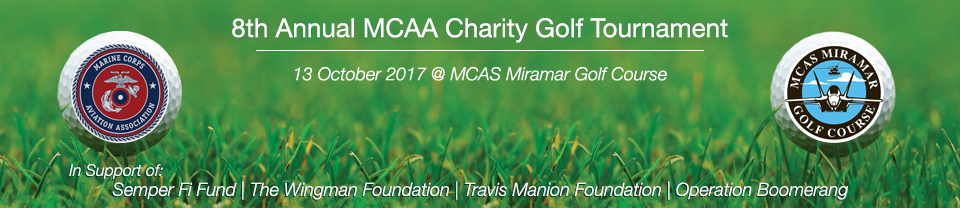
<style>
.page{position:relative;width:960px;height:208px}
.page>*{position:absolute;margin:0}
.t1{font:26px "HelveticaNeue";color:#ffffff}
.t2{font:18px "HelveticaNeue-LightItalic";color:#ffffff}
.t3{font:16px "HelveticaNeue-LightItalic";color:#ffffff}
</style>
<div class="page">
<p class="t1" style="left:232px;top:18px;width:496px;height:25px">8th Annual MCAA Charity Golf Tournament</p>
<p class="t2" style="left:295px;top:67px;width:372px;height:14px">13 October 2017 @ MCAS Miramar Golf Course</p>
<p class="t3" style="left:69px;top:164px;width:94px;height:15px">In Support of:</p>
<p class="t2" style="left:112px;top:181px;width:736px;height:19px">Semper Fi Fund | The Wingman Foundation | Travis Manion Foundation | Operation Boomerang</p>
</div>
